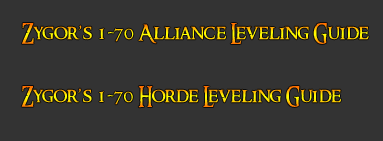
<style>
.page{position:relative;width:383px;height:141px;background:#333333}
.page>*{position:absolute;margin:0}
.t1{font:20px "RingbearerMedium"}
</style>
<div class="page">
<p class="t1" style="left:22px;top:23px;width:347px;height:21px">Zygor’s 1-70 Alliance Leveling Guide</p>
<p class="t1" style="left:21px;top:86px;width:320px;height:22px">Zygor’s 1-70 Horde Leveling Guide</p>
</div>
